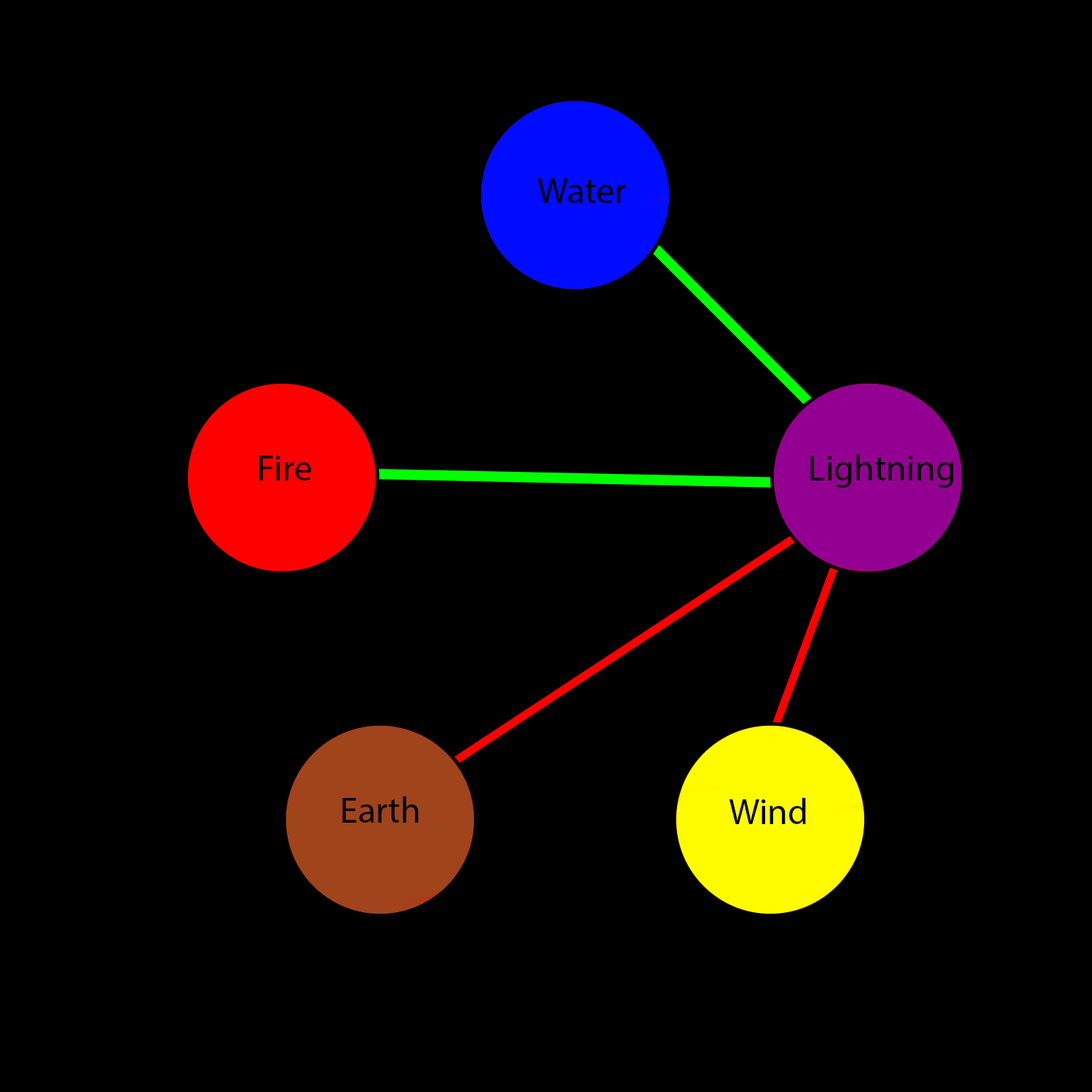
<style>
.page{position:relative;width:1092px;height:1092px;background:#000000}
.page>*{position:absolute;margin:0}
.t1{font:36.4px "MyriadPro-Regular";color:#000000}
</style>
<div class="page">
<p class="t1" style="left:537px;top:178px;width:89px;height:25px">Water</p>
<p class="t1" style="left:259px;top:456px;width:53px;height:24px">Fire</p>
<p class="t1" style="left:810px;top:454px;width:144px;height:34px">Lightning</p>
<p class="t1" style="left:342px;top:796px;width:77px;height:27px">Earth</p>
<p class="t1" style="left:729px;top:798px;width:77px;height:26px">Wind</p>
</div>
